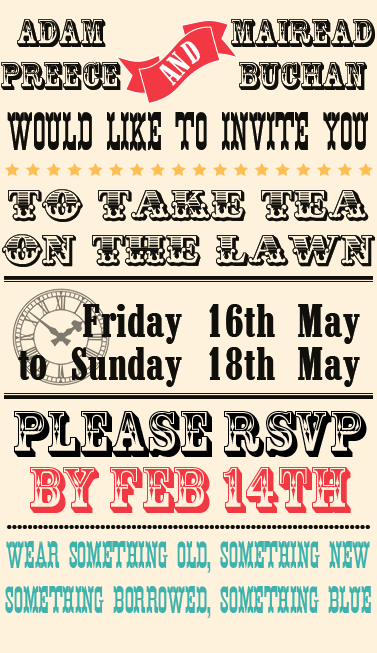
<style>
.page{position:relative;width:377px;height:653px;background:#fff2dc}
.page>*{position:absolute;margin:0}
.t1{font:36.3px "RosewoodStd-Regular";color:#100f0c}
.t2{font:33px "Marlboro";color:#ffffff}
.t3{font:53.9px "K22EurekaNoFrills";color:#100f0c}
.t4{font:35.9px "CastIron";color:#100f0c}
.t5{font:61px/56px "RosewoodStd-Regular";color:#000000}
.t6{font:61px/56px "RosewoodStd-Regular";color:#f33843}
.t7{font:38px "K22EurekaNoFrills";color:#3fb1ad}
</style>
<div class="page">
<p class="t1" style="left:1px;top:19px;width:120px;height:71px;text-align:center">Adam<br>Preece</p>
<p class="t1" style="left:231px;top:19px;width:144px;height:71px;text-align:center">Mairead<br>Buchan</p>
<p class="t2" style="left:159px;top:41px;width:41px;height:45px">AND</p>
<p class="t3" style="left:7px;top:112px;width:361px;height:39px">would like to invite you</p>
<p class="t4" style="left:8px;top:189px;width:361px;height:33px">to take tea</p>
<p class="t4" style="left:2px;top:234px;width:373px;height:33px">on the lawn</p>
<p class="t5" style="left:14px;top:411px;width:353px;height:102px;text-align:center">Please RSVP<br><span class="t6">by Feb 14th</span></p>
<p class="t7" style="left:5px;top:541px;width:366px;height:77px;text-align:center">Wear Something old, something new<br>something borrowed, something blue</p>
</div>
